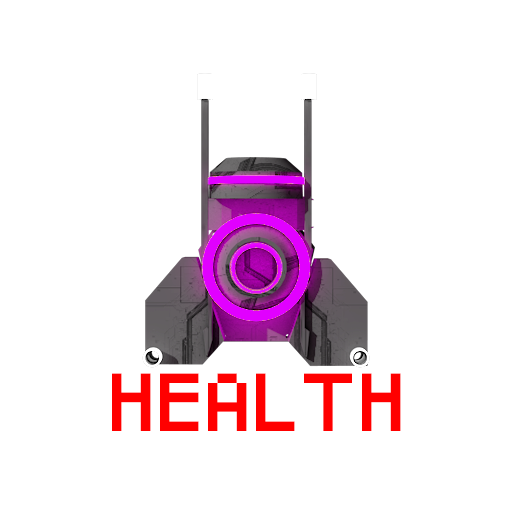
<style>
.page{position:relative;width:512px;height:512px;background:#ffffff}
.page>*{position:absolute;margin:0}
.t1{font:48px "Pixeled";color:#ff0000}
</style>
<div class="page">
<p class="t1" style="left:112px;top:373px;width:289px;height:58px">HEALTH</p>
</div>
